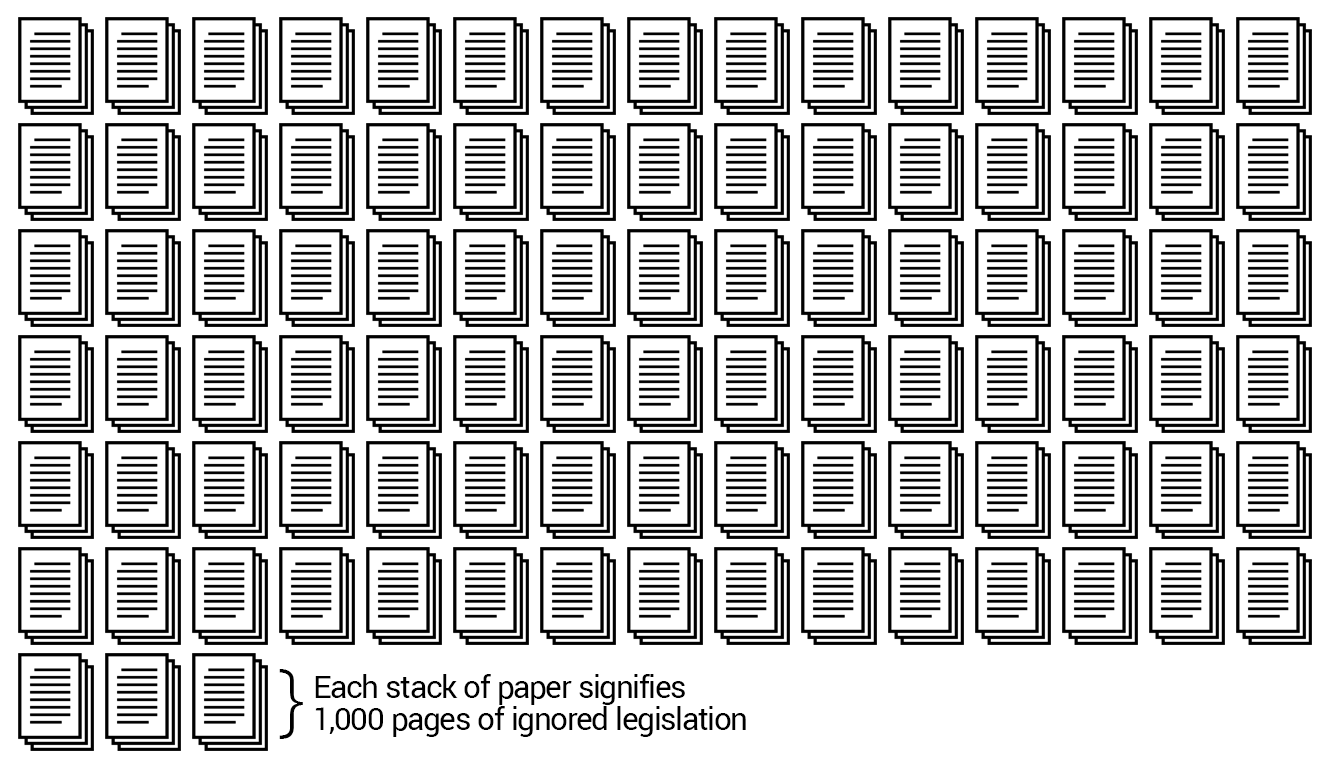
<style>
.page{position:relative;width:1333px;height:768px;background:#ffffff}
.page>*{position:absolute;margin:0}
.t1{font:80px "OpenSans-Light";letter-spacing:-0.04em;color:#000000}
.t2{font:35px/32px "Yantramanav-Regular";letter-spacing:-0.04em;color:#000000}
</style>
<div class="page">
<p class="t1" style="left:279px;top:669px;width:24px;height:70px">}</p>
<p class="t2" style="left:315px;top:674px;width:431px;height:63px">Each stack of paper signifies <br>1,000 pages of ignored legislation</p>
</div>
